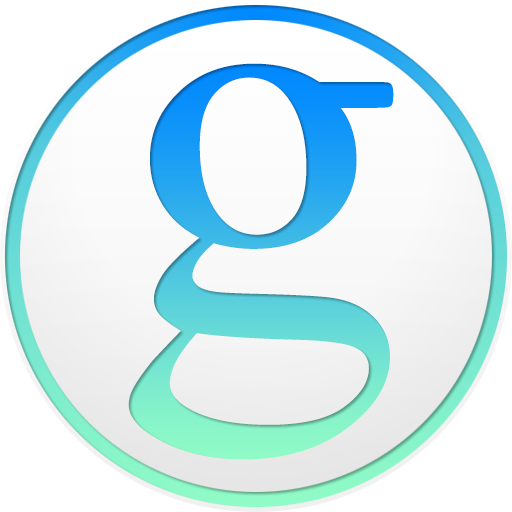
<style>
.page{position:relative;width:512px;height:512px;background:#ffffff}
.page>*{position:absolute;margin:0}
.t1{font:584.8px "TimesNewRomanPSMT"}
</style>
<div class="page">
<p class="t1" style="left:128px;top:63px;width:266px;height:397px">g</p>
</div>
